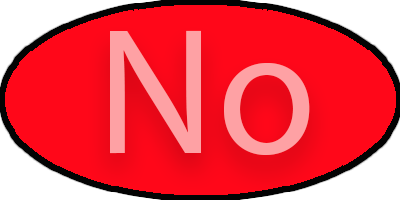
<style>
.page{position:relative;width:400px;height:200px;background:#ff0719}
.page>*{position:absolute;margin:0}
.t1{font:181.1px "MyriadPro-Regular";letter-spacing:0.01em;color:#fea1a4}
</style>
<div class="page">
<p class="t1" style="left:110px;top:30px;width:200px;height:126px">No</p>
</div>
